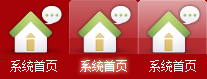
<style>
.page{position:relative;width:207px;height:79px;background:#a60308}
.page>*{position:absolute;margin:0}
.t1{font:12px "NSimSun";color:#fdfafa}
</style>
<div class="page">
<p class="t1" style="left:10px;top:60px;width:47px;height:12px">系统首页</p>
<p class="t1" style="left:80px;top:60px;width:47px;height:12px">系统首页</p>
<p class="t1" style="left:149px;top:60px;width:47px;height:12px">系统首页</p>
</div>
